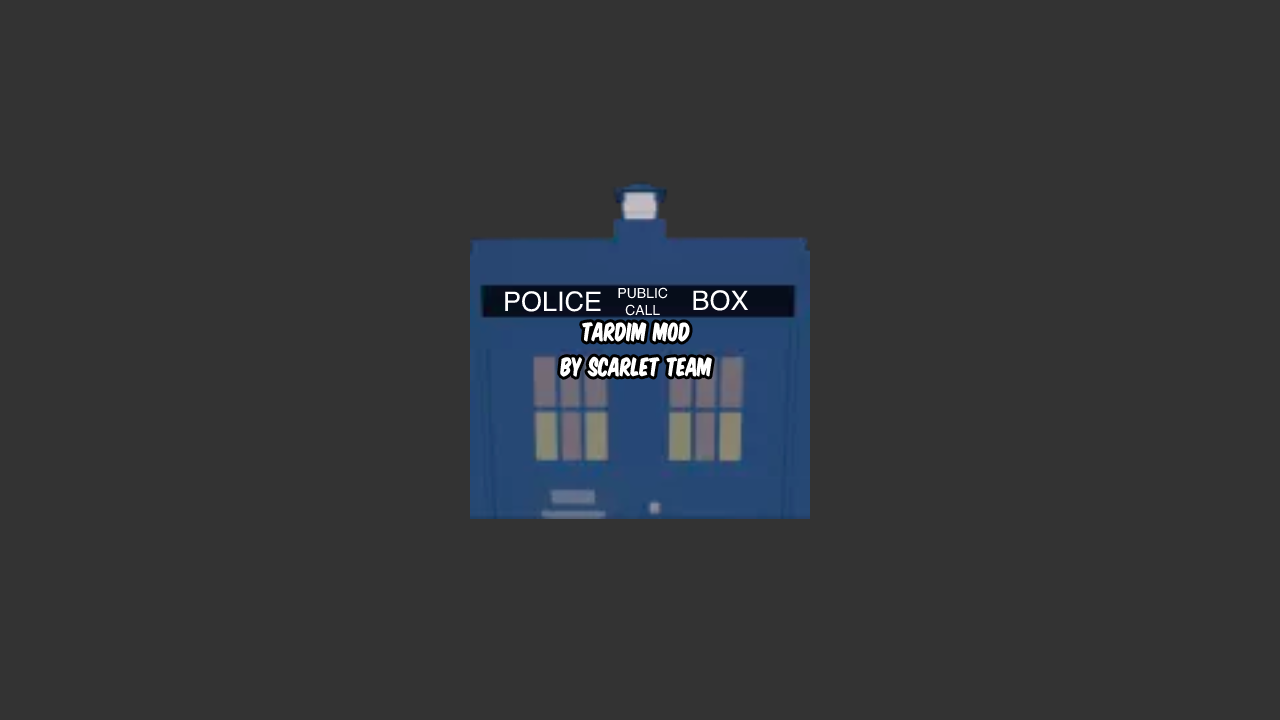
<style>
.page{position:relative;width:1280px;height:720px;background:#333333}
.page>*{position:absolute;margin:0}
.t1{font:27px "Helvetica";color:#ffffff}
.t2{font:14px "Helvetica";color:#ffffff}
.t3{font:29.5px "KomikaTitle-Kaps";color:#ffffff}
</style>
<div class="page">
<p class="t1" style="left:505px;top:291px;width:96px;height:21px">POLICE</p>
<p class="t2" style="left:618px;top:287px;width:50px;height:29px">PUBLIC  <br>  CALL</p>
<p class="t1" style="left:693px;top:290px;width:55px;height:21px">BOX</p>
<p class="t3" style="left:560px;top:322px;width:152px;height:55px;text-align:center">tardim mod<br>by scarlet team</p>
</div>
